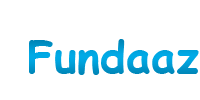
<style>
.page{position:relative;width:200px;height:100px;background:#ffffff}
.page>*{position:absolute;margin:0}
.t1{font:44.4px "ComicSansMS-Bold";color:#00a0d9}
</style>
<div class="page">
<p class="t1" style="left:29px;top:39px;width:170px;height:36px">Fundaaz</p>
</div>
